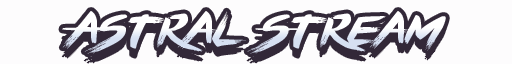
<style>
.page{position:relative;width:512px;height:64px;background:#fdfcfd}
.page>*{position:absolute;margin:0}
.t1{font:58.3px "BRUSHSTRIKE"}
</style>
<div class="page">
<p class="t1" style="left:62px;top:11px;width:384px;height:43px">Astral Stream</p>
</div>
